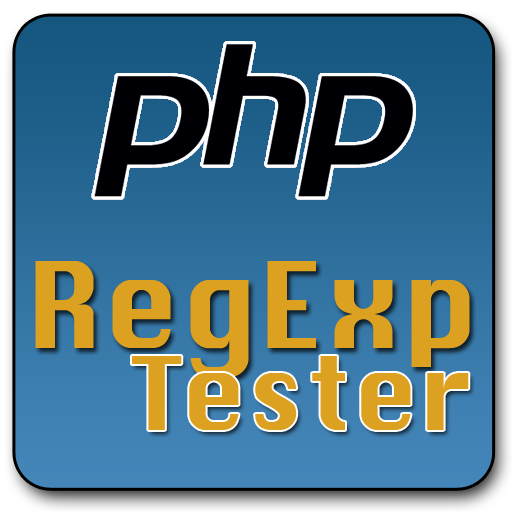
<style>
.page{position:relative;width:512px;height:512px}
.page>*{position:absolute;margin:0}
.t1{font:115.7px "Krungthep";color:#dca121}
.t2{font:98.4px "Krungthep";color:#dca121}
</style>
<div class="page">
<p class="t1" style="left:35px;top:261px;width:435px;height:116px">RegExp</p>
<p class="t2" style="left:132px;top:356px;width:337px;height:74px">Tester</p>
</div>
